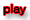
<style>
.page{position:relative;width:30px;height:20px;background:#ffffff}
.page>*{position:absolute;margin:0}
.t1{font:12px "Gulim";color:#000000}
</style>
<div class="page">
<p class="t1" style="left:4px;top:4px;width:22px;height:11px">play</p>
</div>
